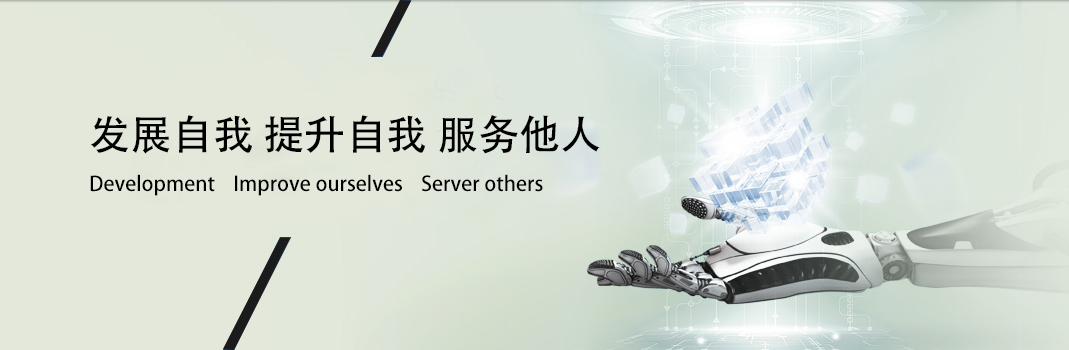
<style>
.page{position:relative;width:1069px;height:350px;background:#e4e8da}
.page>*{position:absolute;margin:0}
.t1{font:41.2px "AdobeHeitiStd-Regular";color:#000000}
.t2{font:20.3px "AdobeHeitiStd-Regular";color:#000000}
</style>
<div class="page">
<p class="t1" style="left:90px;top:114px;width:510px;height:40px">发展自我 提升自我 服务他人</p>
<p class="t2" style="left:90px;top:174px;width:453px;height:22px">Development    Improve ourselves    Server others</p>
</div>
